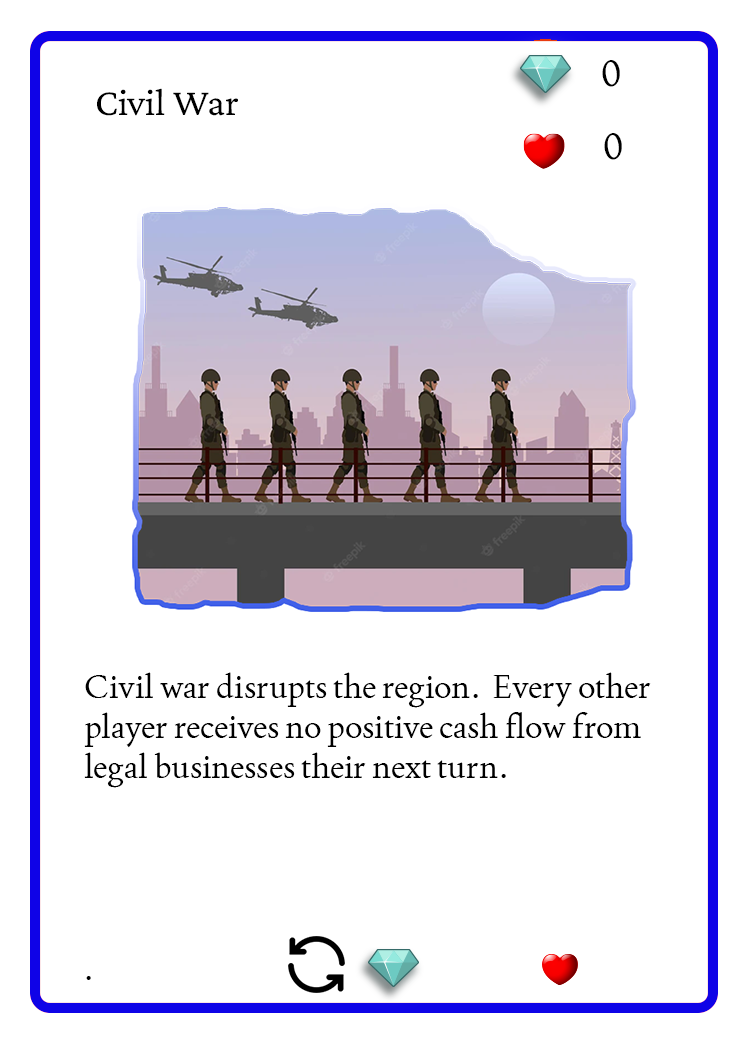
<style>
.page{position:relative;width:750px;height:1050px;background:#ffffff}
.page>*{position:absolute;margin:0}
.t1{font:37.5px "Joan-Regular";color:#000000;text-transform:uppercase}
.t2{font:38.9px "CrimsonPro-Regular";color:#000000}
.t3{font:33.3px "Joan-Regular";color:#000000}
</style>
<div class="page">
<p class="t1" style="left:602px;top:60px;width:18px;height:27px">0</p>
<p class="t2" style="left:97px;top:88px;width:141px;height:28px">Civil War</p>
<p class="t1" style="left:604px;top:133px;width:18px;height:27px">0</p>
<p class="t3" style="left:84px;top:672px;width:567px;height:116px">Civil war disrupts the region.  Every other player receives no positive cash flow from legal businesses their next turn.</p>
<p class="t3" style="left:86px;top:976px;width:5px;height:4px">.</p>
</div>
